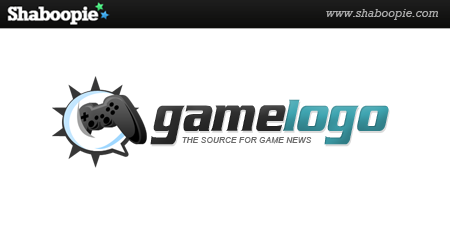
<style>
.page{position:relative;width:450px;height:250px;background:#ffffff}
.page>*{position:absolute;margin:0}
.t1{font:75px "AirMillhouseItalic";letter-spacing:-0.01em;color:#2f2f2f}
.t2{font:75px "AirMillhouseItalic";letter-spacing:-0.01em;color:#3fa5b1}
.t3{font:8.3px "Arial-ItalicMT";letter-spacing:0.005em;color:#6b6b6b}
</style>
<div class="page">
<p class="t1" style="left:150px;top:99px;width:239px;height:46px">game<span class="t2">logo</span></p>
<p class="t3" style="left:182px;top:137px;width:130px;height:7px">THE SOURCE FOR GAME NEWS</p>
</div>
